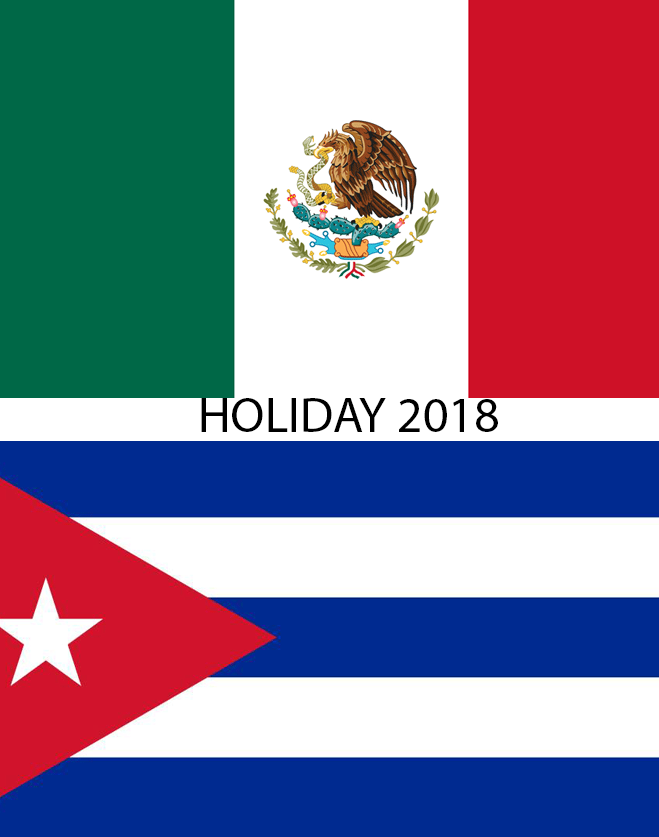
<style>
.page{position:relative;width:659px;height:837px;background:#ffffff}
.page>*{position:absolute;margin:0}
.t1{font:12px "MyriadPro-Regular";color:#000000}
</style>
<div class="page">
<p class="t1" style="left:201px;top:398px;width:297px;height:34px">HOLIDAY 2018</p>
</div>
